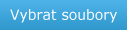
<style>
.page{position:relative;width:127px;height:30px}
.page>*{position:absolute;margin:0}
.t1{font:14px "Verdana";color:#ffffff}
</style>
<div class="page">
<p class="t1" style="left:10px;top:9px;width:107px;height:14px">Vybrat soubory</p>
</div>
